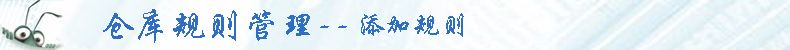
<style>
.page{position:relative;width:790px;height:50px}
.page>*{position:absolute;margin:0}
.t1{font:36px "STXingkai";color:#2f6ec3}
.t2{font:28px "STXingkai";color:#2f6ec3}
</style>
<div class="page">
<p class="t1" style="left:103px;top:9px;width:244px;height:34px">仓库规则管理--</p>
<p class="t2" style="left:361px;top:13px;width:103px;height:24px">添加规则</p>
</div>
